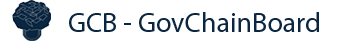
<style>
.page{position:relative;width:350px;height:42px;background:#ffffff}
.page>*{position:absolute;margin:0}
.t1{font:28px "MyriadPro-Regular";color:#0a2640}
</style>
<div class="page">
<p class="t1" style="left:69px;top:12px;width:250px;height:20px">GCB - GovChainBoard</p>
</div>
